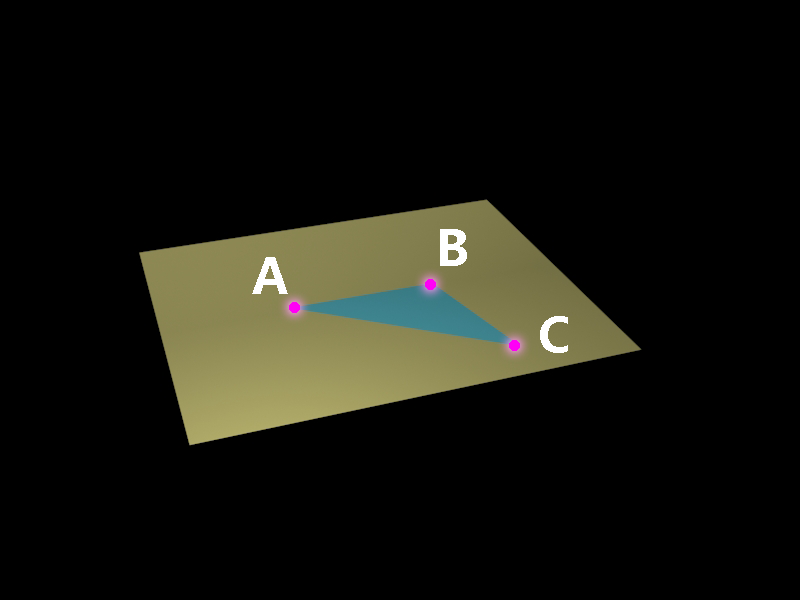
<style>
.page{position:relative;width:800px;height:600px;background:#000000}
.page>*{position:absolute;margin:0}
.t1{font:48px "MicrosoftYaHei-Bold";color:#ffffff}
</style>
<div class="page">
<p class="t1" style="left:440px;top:229px;width:27px;height:37px">B</p>
<p class="t1" style="left:252px;top:257px;width:36px;height:37px">A</p>
<p class="t1" style="left:540px;top:316px;width:28px;height:37px">C</p>
</div>
